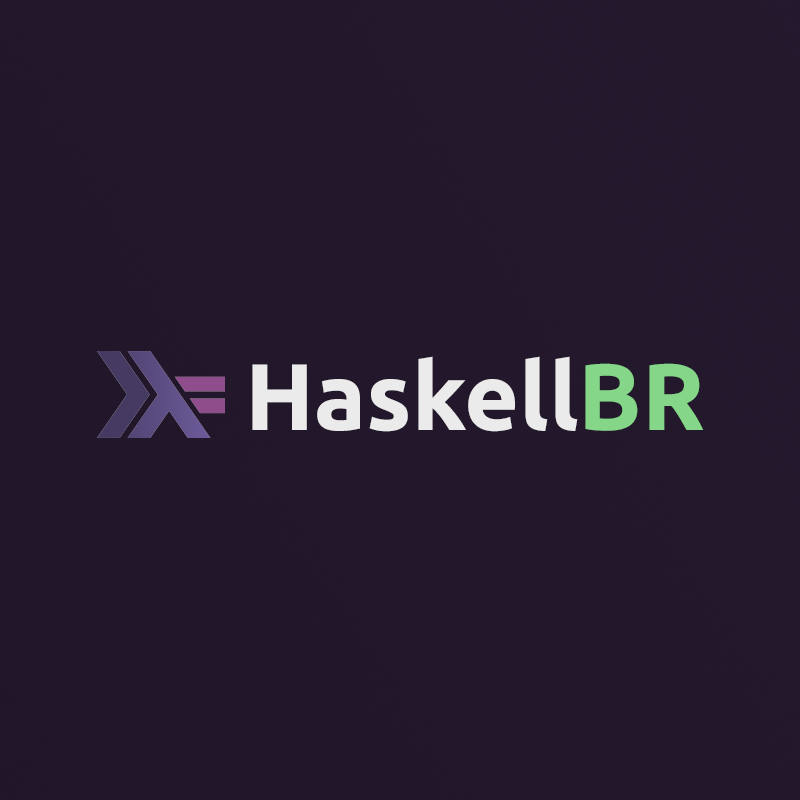
<style>
.page{position:relative;width:800px;height:800px}
.page>*{position:absolute;margin:0}
.t1{font:94.5px "Ubuntu-Bold";color:#ebebeb}
.t2{font:94.5px "Ubuntu-Bold";color:#85d689}
</style>
<div class="page">
<p class="t1" style="left:252px;top:356px;width:452px;height:76px">Haskell<span class="t2">BR</span></p>
</div>
